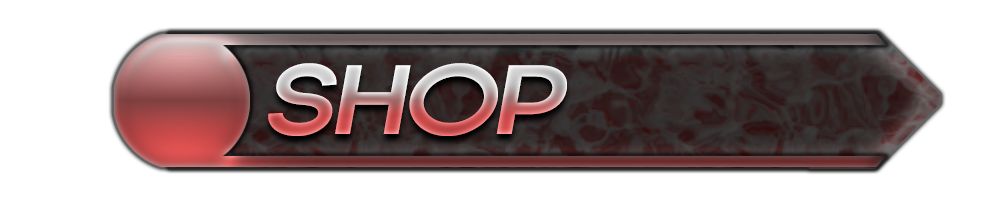
<style>
.page{position:relative;width:1000px;height:200px;background:#ffffff}
.page>*{position:absolute;margin:0}
.t1{font:84.8px "GonziExpandedPERSONALUSE-BoldItalic"}
</style>
<div class="page">
<p class="t1" style="left:268px;top:63px;width:299px;height:73px">SHOP</p>
</div>
